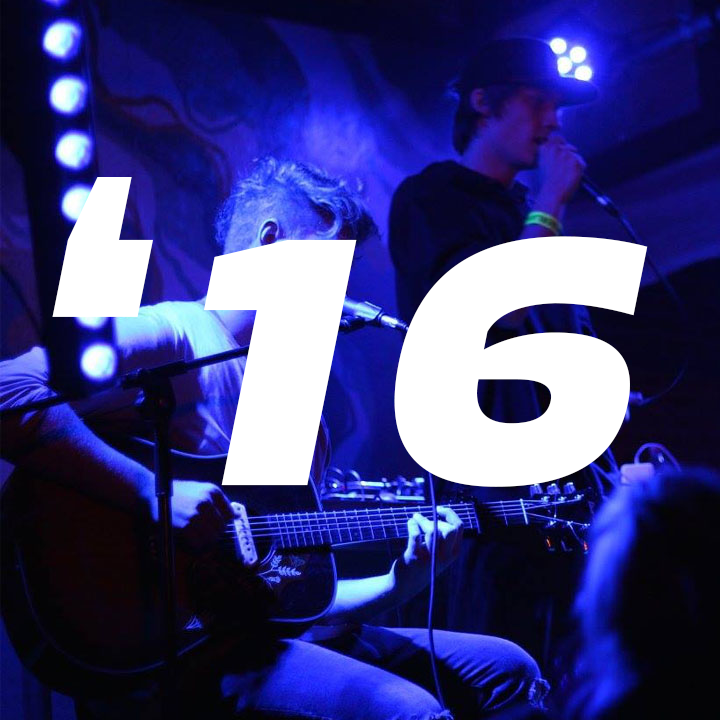
<style>
.page{position:relative;width:720px;height:720px}
.page>*{position:absolute;margin:0}
.t1{font:350px "Majoris-Italic";letter-spacing:0.1em;color:#ffffff;text-transform:uppercase}
</style>
<div class="page">
<p class="t1" style="left:52px;top:177px;width:596px;height:310px">‘16</p>
</div>
